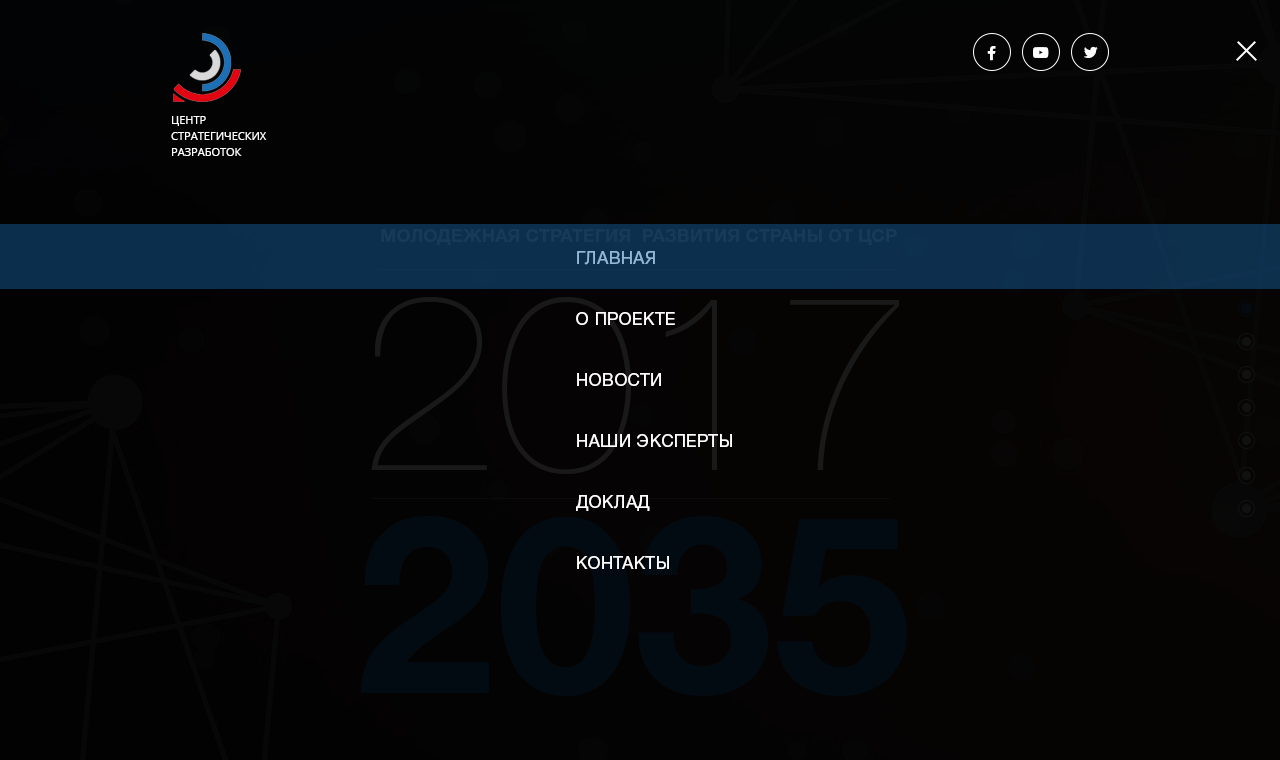
<style>
.page{position:relative;width:1280px;height:760px}
.page>*{position:absolute;margin:0}
.t1{font:11px/16px "OpenSans-Regular";color:#ffffff}
.t2{font:18px "HelveticaNeueCyr-Bold";letter-spacing:0.005em;color:#173a59;text-transform:uppercase}
.t3{font:17px/61px "HelveticaNeueCyr-Roman";letter-spacing:0.025em;color:#ffffff}
.t4{font:250px "HelveticaNeueCyr-Bold";color:#030b12;text-transform:uppercase}
</style>
<div class="page">
<p class="t1" style="left:171px;top:116px;width:96px;height:40px">ЦЕНТР <br>СТРАТЕГИЧЕСКИХ<br>РАЗРАБОТОК</p>
<p class="t2" style="left:381px;top:229px;width:516px;height:16px">Молодежная стратегия  развития страны от ЦСР</p>
<p class="t3" style="left:576px;top:251px;width:156px;height:318px">ГЛАВНАЯ<br>О ПРОЕКТЕ<br>НОВОСТИ<br>НАШИ ЭКСПЕРТЫ<br>ДОКЛАД<br>КОНТАКТЫ</p>
<p class="t4" style="left:361px;top:516px;width:546px;height:180px">2035</p>
</div>
